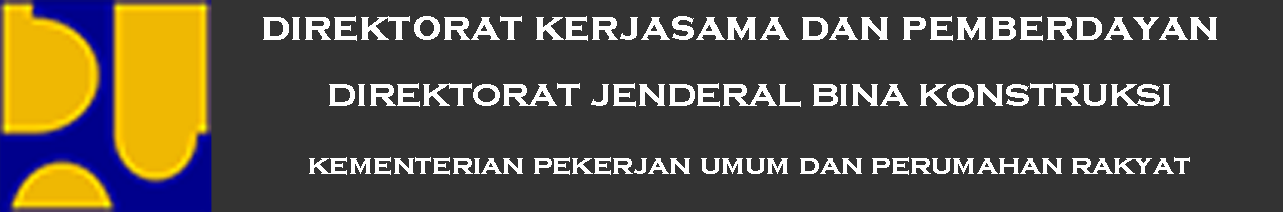
<style>
.page{position:relative;width:1283px;height:212px;background:#333333}
.page>*{position:absolute;margin:0}
.t1{font:42.3px "CopperplateGothic-Bold";color:#ffffff}
.t2{font:40.6px "CopperplateGothic-Bold";color:#ffffff}
.t3{font:30.4px "CopperplateGothic-Bold";color:#ffffff}
</style>
<div class="page">
<p class="t1" style="left:263px;top:16px;width:954px;height:25px">direktorat kerjasama dan pemberdayan</p>
<p class="t2" style="left:329px;top:83px;width:841px;height:24px">direktorat jenderal bina konstruksi</p>
<p class="t3" style="left:309px;top:157px;width:881px;height:18px">kementerian pekerjan umum dan perumahan rakyat</p>
</div>
